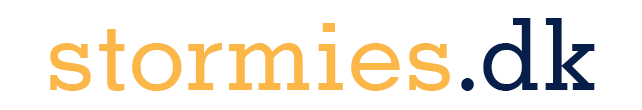
<style>
.page{position:relative;width:642px;height:110px;background:#ffffff}
.page>*{position:absolute;margin:0}
.t1{font:100px "MemphisLTStd-Medium";letter-spacing:0.005em;color:#fbb849}
.t2{font:100px "MemphisLTStd-Medium";letter-spacing:0.005em;color:#061f4a}
</style>
<div class="page">
<p class="t1" style="left:50px;top:18px;width:545px;height:73px">stormies<span class="t2">.dk</span></p>
</div>
